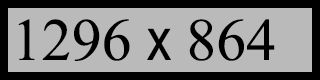
<style>
.page{position:relative;width:320px;height:80px;background:#bababa}
.page>*{position:absolute;margin:0}
.t1{font:60px "TimesNewRomanPSMT";color:#000000}
.t2{font:60px "ArialNarrow";color:#000000}
</style>
<div class="page">
<p class="t1" style="left:18px;top:19px;width:257px;height:42px">1296 <span class="t2">x</span> 864</p>
</div>
